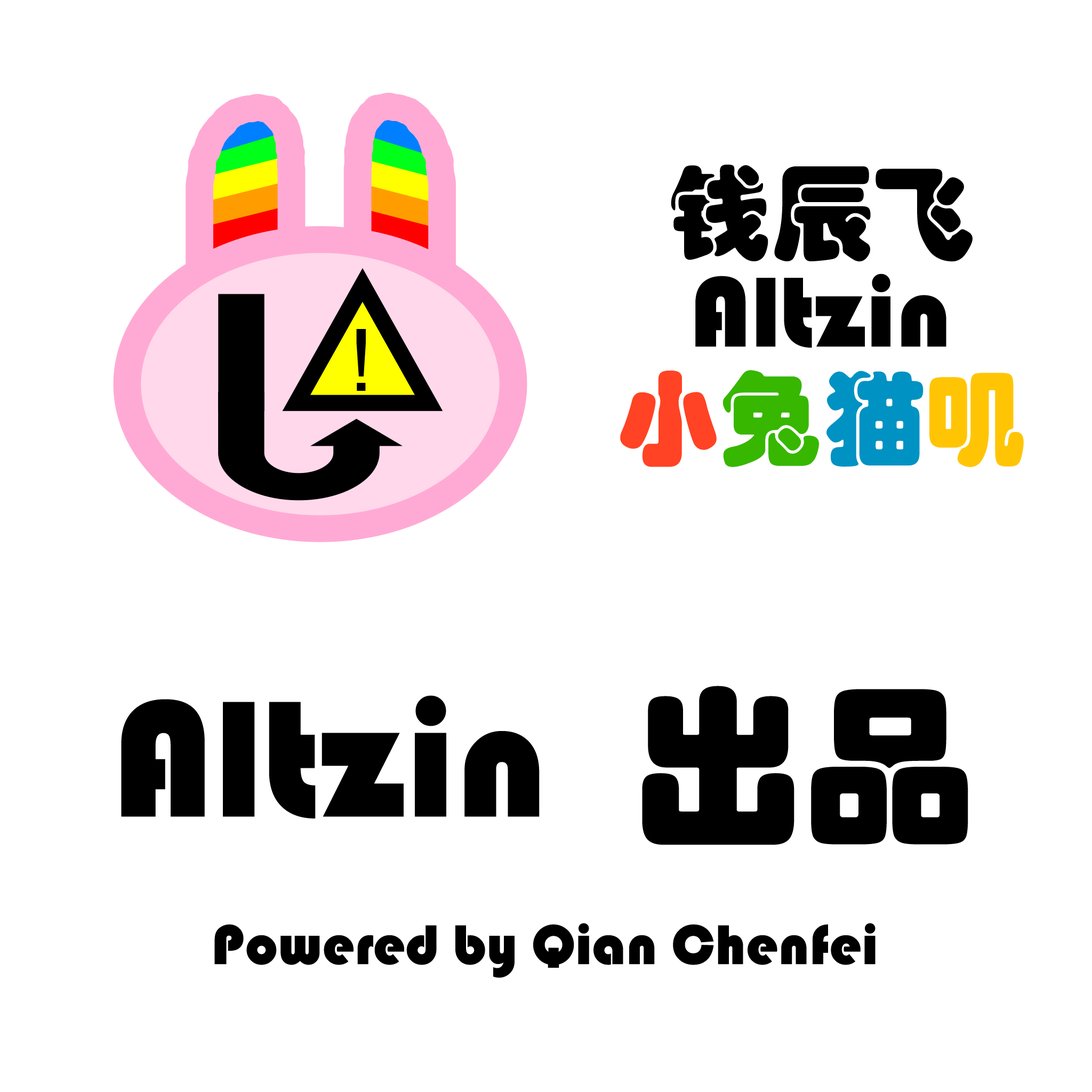
<style>
.page{position:relative;width:1092px;height:1092px;background:#ffffff}
.page>*{position:absolute;margin:0}
.t1{font:103px/103px "STHupo";color:#000000}
.t2{font:103px/103px "STHupo";color:#ff4324}
.t3{font:103px/103px "STHupo";color:#37b700}
.t4{font:103px/103px "STHupo";color:#0092c3}
.t5{font:103px/103px "STHupo";color:#ffc505}
.t6{font:171.6px "STHupo";color:#000000}
.t7{font:57.9px "STHupo";color:#000000}
</style>
<div class="page">
<p class="t1" style="left:620px;top:164px;width:404px;height:303px;text-align:center">钱辰飞<br>Altzin<br><span class="t2">小</span><span class="t3">兔</span><span class="t4">猫</span><span class="t5">叽</span></p>
<p class="t6" style="left:121px;top:686px;width:847px;height:159px">Altzin  出品</p>
<p class="t7" style="left:214px;top:923px;width:662px;height:55px">Powered by Qian Chenfei</p>
</div>
